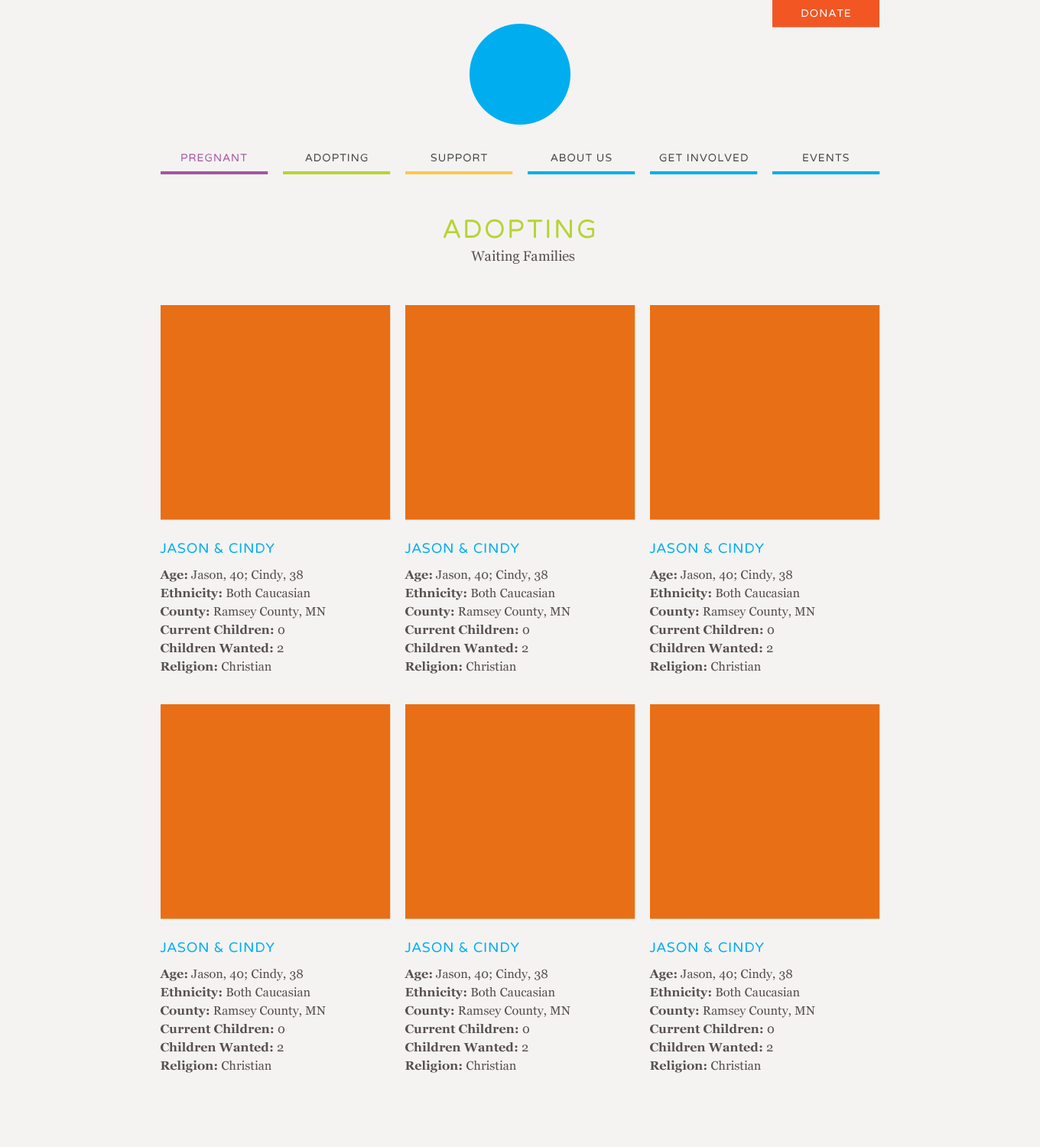
<style>
.page{position:relative;width:1040px;height:1147px;background:#f4f3f2}
.page>*{position:absolute;margin:0}
.t1{font:10.7px "VarelaRound";letter-spacing:0.075em;color:#ffffff;text-transform:uppercase}
.t2{font:10.7px "VarelaRound";letter-spacing:0.075em;color:#a854a1;text-transform:uppercase}
.t3{font:10.7px "VarelaRound";letter-spacing:0.075em;color:#464646;text-transform:uppercase}
.t4{font:26px "VarelaRound";letter-spacing:0.075em;color:#b7d433;text-transform:uppercase}
.t5{font:13.8px "Georgia";color:#58504d}
.t6{font:12.2px/18.3px "Georgia";letter-spacing:0.005em;color:#58504d}
.t7{font:13.8px/18.3px "VarelaRound";letter-spacing:0.04em;color:#00aeef;text-transform:uppercase}
.t8{font:12.2px/18.3px "Georgia-Bold";letter-spacing:0.005em;color:#58504d}
</style>
<div class="page">
<p class="t1" style="left:801px;top:9px;width:49px;height:9px">DONATE</p>
<p class="t2" style="left:181px;top:154px;width:66px;height:8px">pregnant</p>
<p class="t3" style="left:305px;top:154px;width:63px;height:8px">adopting</p>
<p class="t3" style="left:430px;top:154px;width:57px;height:8px">support</p>
<p class="t3" style="left:550px;top:154px;width:62px;height:8px">ABOUT us</p>
<p class="t3" style="left:659px;top:154px;width:89px;height:8px">get involved</p>
<p class="t3" style="left:803px;top:154px;width:46px;height:7px">events</p>
<p class="t4" style="left:443px;top:219px;width:151px;height:20px">ADopting</p>
<p class="t5" style="left:471px;top:250px;width:104px;height:14px">Waiting Families</p>
<p class="t6" style="left:160px;top:543px;width:166px;height:131px"><span class="t7">Jason &amp; Cindy<br></span><span class="t8">Age:</span> Jason, 40; Cindy, 38<br><span class="t8">Ethnicity: </span>Both Caucasian<br><span class="t8">County: </span>Ramsey County, MN<br><span class="t8">Current Children: </span>0<br><span class="t8">Children Wanted: </span>2<br><span class="t8">Religion:</span> Christian</p>
<p class="t6" style="left:404px;top:543px;width:166px;height:131px"><span class="t7">Jason &amp; Cindy<br></span><span class="t8">Age:</span> Jason, 40; Cindy, 38<br><span class="t8">Ethnicity: </span>Both Caucasian<br><span class="t8">County: </span>Ramsey County, MN<br><span class="t8">Current Children: </span>0<br><span class="t8">Children Wanted: </span>2<br><span class="t8">Religion:</span> Christian</p>
<p class="t6" style="left:649px;top:543px;width:166px;height:131px"><span class="t7">Jason &amp; Cindy<br></span><span class="t8">Age:</span> Jason, 40; Cindy, 38<br><span class="t8">Ethnicity: </span>Both Caucasian<br><span class="t8">County: </span>Ramsey County, MN<br><span class="t8">Current Children: </span>0<br><span class="t8">Children Wanted: </span>2<br><span class="t8">Religion:</span> Christian</p>
<p class="t6" style="left:160px;top:942px;width:166px;height:131px"><span class="t7">Jason &amp; Cindy<br></span><span class="t8">Age:</span> Jason, 40; Cindy, 38<br><span class="t8">Ethnicity: </span>Both Caucasian<br><span class="t8">County: </span>Ramsey County, MN<br><span class="t8">Current Children: </span>0<br><span class="t8">Children Wanted: </span>2<br><span class="t8">Religion:</span> Christian</p>
<p class="t6" style="left:404px;top:942px;width:166px;height:131px"><span class="t7">Jason &amp; Cindy<br></span><span class="t8">Age:</span> Jason, 40; Cindy, 38<br><span class="t8">Ethnicity: </span>Both Caucasian<br><span class="t8">County: </span>Ramsey County, MN<br><span class="t8">Current Children: </span>0<br><span class="t8">Children Wanted: </span>2<br><span class="t8">Religion:</span> Christian</p>
<p class="t6" style="left:649px;top:942px;width:166px;height:131px"><span class="t7">Jason &amp; Cindy<br></span><span class="t8">Age:</span> Jason, 40; Cindy, 38<br><span class="t8">Ethnicity: </span>Both Caucasian<br><span class="t8">County: </span>Ramsey County, MN<br><span class="t8">Current Children: </span>0<br><span class="t8">Children Wanted: </span>2<br><span class="t8">Religion:</span> Christian</p>
</div>
